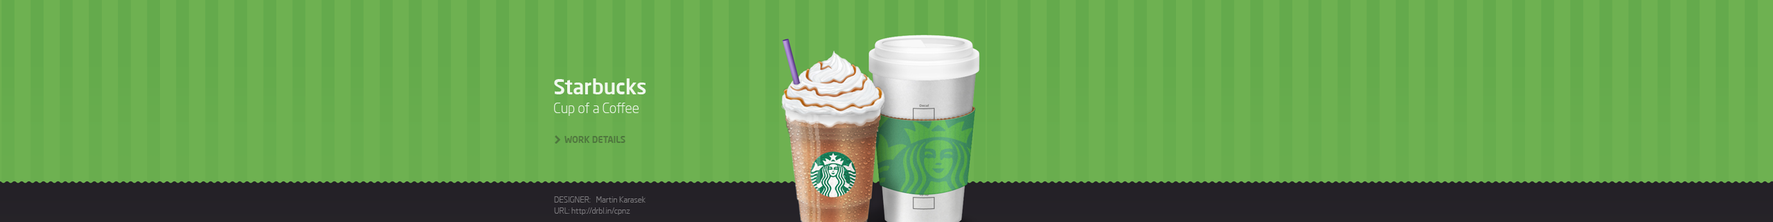
<style>
.page{position:relative;width:1773px;height:222px;background:#6eb151}
.page>*{position:absolute;margin:0}
.t1{font:20.8px "NeoSansPro-Medium";letter-spacing:-0.005em;color:#ffffff}
.t2{font:13.8px "NeoSansPro-Light";letter-spacing:-0.005em;color:#ffffff}
.t3{font:9px "NeoSansPro-Medium";letter-spacing:-0.005em;color:#51783f}
.t4{font:8.3px "NeoSansPro-Light";letter-spacing:-0.005em;color:#7c7a7d}
.t5{font:8.3px "NeoSansPro-Light";letter-spacing:-0.005em;color:#7c7a7e}
</style>
<div class="page">
<p class="t1" style="left:554px;top:78px;width:92px;height:16px;opacity:0.9">Starbucks</p>
<p class="t2" style="left:554px;top:102px;width:84px;height:14px;opacity:0.9">Cup of a Coffee</p>
<p class="t3" style="left:564px;top:136px;width:61px;height:7px">WORK DETAILS</p>
<p class="t4" style="left:554px;top:196px;width:91px;height:6px">DESIGNER:   Martin Karasek</p>
<p class="t5" style="left:554px;top:207px;width:76px;height:8px">URL: http://drbl.in/cpnz</p>
</div>
